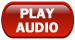
<style>
.page{position:relative;width:75px;height:40px;background:#ffffff}
.page>*{position:absolute;margin:0}
.t1{font:14px/14px "FranklinGothic-Demi";color:#ffffff;font-weight:bold}
</style>
<div class="page">
<p class="t1" style="left:15px;top:8px;width:43px;height:25px;text-align:center">PLAY<br>AUDIO</p>
</div>
